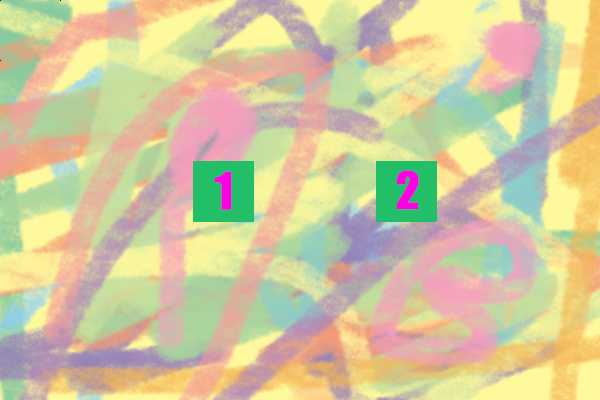
<style>
.page{position:relative;width:600px;height:400px}
.page>*{position:absolute;margin:0}
.t1{font:48px "Impact";color:#ff00e4}
</style>
<div class="page">
<p class="t1" style="left:215px;top:171px;width:17px;height:39px">1</p>
<p class="t1" style="left:397px;top:170px;width:22px;height:40px">2</p>
</div>
